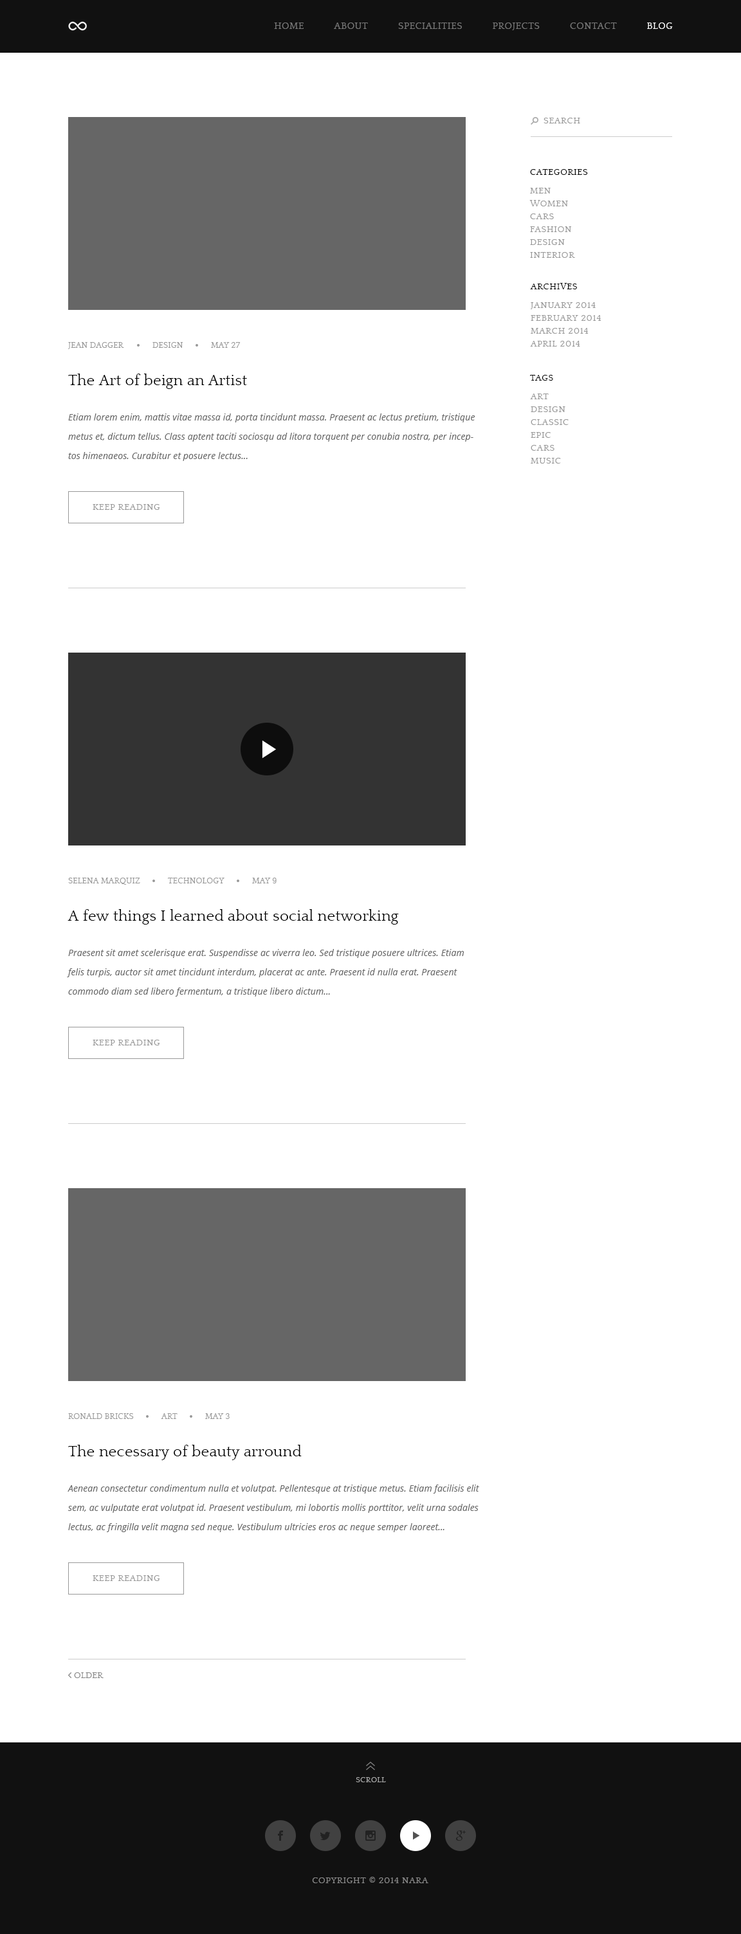
<style>
.page{position:relative;width:741px;height:1934px;background:#ffffff}
.page>*{position:absolute;margin:0}
.t1{font:9.6px "Quattrocento";letter-spacing:0.04em;color:#777777;text-transform:uppercase}
.t2{font:9.6px "Quattrocento";letter-spacing:0.04em;color:#ffffff;text-transform:uppercase}
.t3{font:9px "Quattrocento";letter-spacing:0.05em;color:#999999;text-transform:uppercase}
.t4{font:9px "Quattrocento";letter-spacing:0.05em;color:#000000;text-transform:uppercase}
.t5{font:9px/12.9px "Quattrocento";letter-spacing:0.05em;color:#999999;text-transform:uppercase}
.t6{font:8.4px "Quattrocento";letter-spacing:0.01em;color:#999999;text-transform:uppercase}
.t7{font:15.4px "Quattrocento";letter-spacing:0.01em;color:#000000}
.t8{font:9px/19.3px "OpenSans-Italic";letter-spacing:0.01em;color:#676767}
.t9{font:9px "Quattrocento";letter-spacing:0.01em;color:#888888;text-transform:uppercase}
.t10{font:7.7px "Quattrocento";letter-spacing:0.05em;color:#a6a6a6;text-transform:uppercase}
.t11{font:9px "Quattrocento";letter-spacing:0.05em;color:#888888;text-transform:uppercase}
</style>
<div class="page">
<p class="t1" style="left:274px;top:22px;width:398px;height:8px">HOME           ABOUT           SPECIALITIES           PROJECTS           CONTACT           <span class="t2">BLOG</span></p>
<p class="t3" style="left:543px;top:118px;width:37px;height:5px">SEARCH</p>
<p class="t4" style="left:530px;top:169px;width:58px;height:6px">CATEGORIES</p>
<p class="t5" style="left:529px;top:188px;width:46px;height:70px">MEN<br>WOMEN<br>CARS<br>FASHION<br>DESIGN<br>INTERIOR</p>
<p class="t4" style="left:530px;top:283px;width:47px;height:6px">ARCHIVES</p>
<p class="t5" style="left:530px;top:302px;width:71px;height:44px">JANUARY 2014<br>FEBRUARY 2014<br>MARCH 2014<br>APRIL 2014</p>
<p class="t6" style="left:68px;top:342px;width:56px;height:7px">JEAN DAGGER</p>
<p class="t6" style="left:152px;top:342px;width:31px;height:6px">design</p>
<p class="t6" style="left:211px;top:342px;width:29px;height:6px">may 27</p>
<p class="t7" style="left:68px;top:374px;width:179px;height:15px">The Art of beign an Artist</p>
<p class="t4" style="left:530px;top:375px;width:23px;height:6px">TAGS</p>
<p class="t5" style="left:530px;top:393px;width:38px;height:71px">ART<br>DESIGN<br>CLASSIC<br>EPIC<br>CARS<br>MUSIC</p>
<p class="t8" style="left:68px;top:413px;width:407px;height:48px">Etiam lorem enim, mattis vitae massa id, porta tincidunt massa. Praesent ac lectus pretium, tristique metus et, dictum tellus. Class aptent taciti sociosqu ad litora torquent per conubia nostra, per inceptos himenaeos. Curabitur et posuere lectus...</p>
<p class="t3" style="left:93px;top:504px;width:67px;height:6px">KEEP READING</p>
<p class="t6" style="left:68px;top:878px;width:72px;height:7px">SELENA MARQUIZ</p>
<p class="t6" style="left:168px;top:878px;width:56px;height:5px">TECHNOLOGY</p>
<p class="t6" style="left:252px;top:878px;width:24px;height:5px">may 9</p>
<p class="t7" style="left:68px;top:909px;width:331px;height:15px">A few things I learned about social networking</p>
<p class="t8" style="left:67px;top:949px;width:397px;height:47px">Praesent sit amet scelerisque erat. Suspendisse ac viverra leo. Sed tristique posuere ultrices. Etiam felis turpis, auctor sit amet tincidunt interdum, placerat ac ante. Praesent id nulla erat. Praesent commodo diam sed libero fermentum, a tristique libero dictum...</p>
<p class="t3" style="left:93px;top:1040px;width:67px;height:5px">KEEP READING</p>
<p class="t6" style="left:68px;top:1413px;width:66px;height:6px">RONALD BRICKS</p>
<p class="t6" style="left:161px;top:1413px;width:16px;height:6px">ART</p>
<p class="t6" style="left:205px;top:1413px;width:25px;height:6px">MAY 3</p>
<p class="t7" style="left:68px;top:1444px;width:234px;height:16px">The necessary of beauty arround</p>
<p class="t8" style="left:68px;top:1484px;width:411px;height:48px">Aenean consectetur condimentum nulla et volutpat. Pellentesque at tristique metus. Etiam facilisis elit sem, ac vulputate erat volutpat id. Praesent vestibulum, mi lobortis mollis porttitor, velit urna sodales lectus, ac fringilla velit magna sed neque. Vestibulum ultricies eros ac neque semper laoreet...</p>
<p class="t3" style="left:93px;top:1575px;width:67px;height:6px">KEEP READING</p>
<p class="t9" style="left:74px;top:1672px;width:30px;height:6px">OLDER</p>
<p class="t10" style="left:356px;top:1777px;width:30px;height:5px">SCROLL</p>
<p class="t11" style="left:312px;top:1877px;width:116px;height:6px">Copyright © 2014 NARA</p>
</div>
